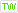
<style>
.page{position:relative;width:18px;height:13px;background:#dcdcdc}
.page>*{position:absolute;margin:0}
.t1{font:9px "ArialMT";color:#58d812}
</style>
<div class="page">
<p class="t1" style="left:2px;top:3px;width:14px;height:7px">TW</p>
</div>
